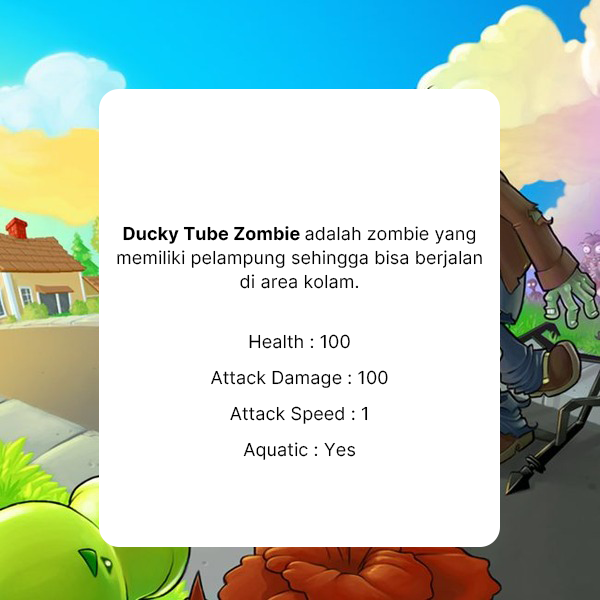
<style>
.page{position:relative;width:600px;height:600px;background:#ffffff}
.page>*{position:absolute;margin:0}
.t1{font:18px/24px "Inter-Regular";letter-spacing:0.005em;color:#000000}
.t2{font:18px "Inter-Regular";letter-spacing:0.005em;color:#000000}
.t3{font:18px/24px "Inter-Bold";letter-spacing:0.005em;color:#000000}
.t4{font:18px/36px "Inter-Regular";letter-spacing:0.005em;color:#000000}
</style>
<div class="page">
<p class="t1" style="left:117px;top:226px;width:365px;height:234px;text-align:center"><span class="t2"><br></span><span class="t3">Ducky Tube Zombie </span>adalah zombie yang memiliki pelampung sehingga bisa berjalan di area kolam.<br><br><span class="t4">Health : 100<br>Attack Damage : 100<br>Attack Speed : 1<br>Aquatic : Yes</span></p>
</div>
